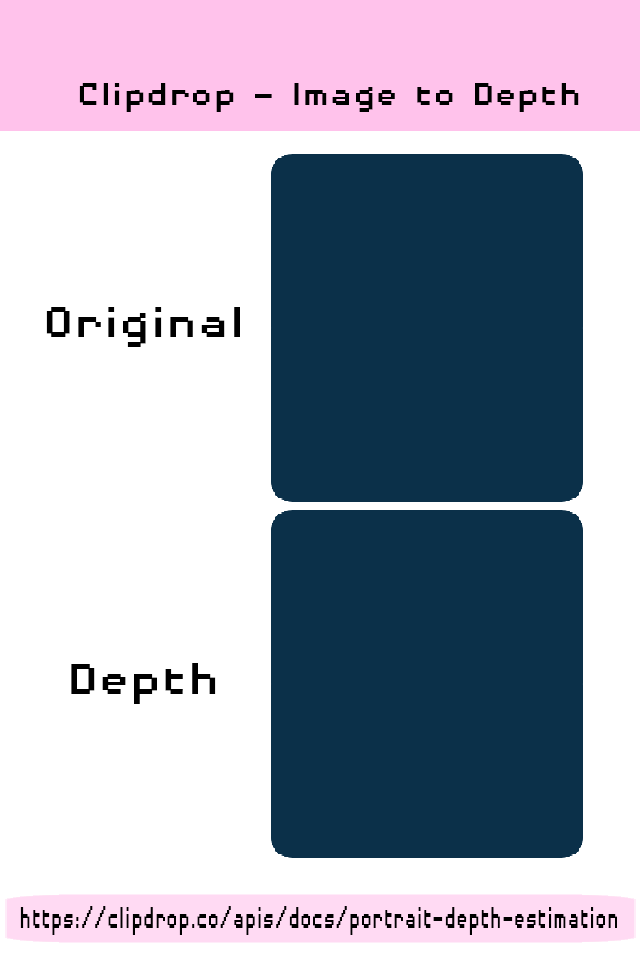
<style>
.page{position:relative;width:640px;height:960px;background:#ffffff}
.page>*{position:absolute;margin:0}
.t1{font:40.9px "DisposableDroidBB";color:#000000;scale:1.14 1}
.t2{font:55.8px "DisposableDroidBB";color:#000000;scale:1.14 1}
.t3{font:57.1px "DisposableDroidBB";color:#000000;scale:1.14 1}
.t4{font:39.7px "DisposableDroidBB";color:#000000;scale:0.62 1}
</style>
<div class="page">
<p class="t1" style="left:79px;top:83px;width:500px;height:29px">Clipdrop - Image to Depth</p>
<p class="t2" style="left:46px;top:307px;width:194px;height:40px">Original</p>
<p class="t3" style="left:71px;top:663px;width:145px;height:41px">Depth</p>
<p class="t4" style="left:20px;top:906px;width:597px;height:29px">https://clipdrop.co/apis/docs/portrait-depth-estimation</p>
</div>
